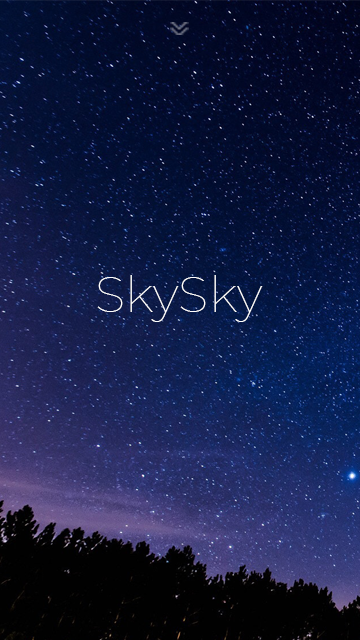
<style>
.page{position:relative;width:360px;height:640px}
.page>*{position:absolute;margin:0}
.t1{font:50px "Montserrat-Thin";color:#ffffff}
</style>
<div class="page">
<p class="t1" style="left:97px;top:275px;width:166px;height:47px">SkySky</p>
</div>
